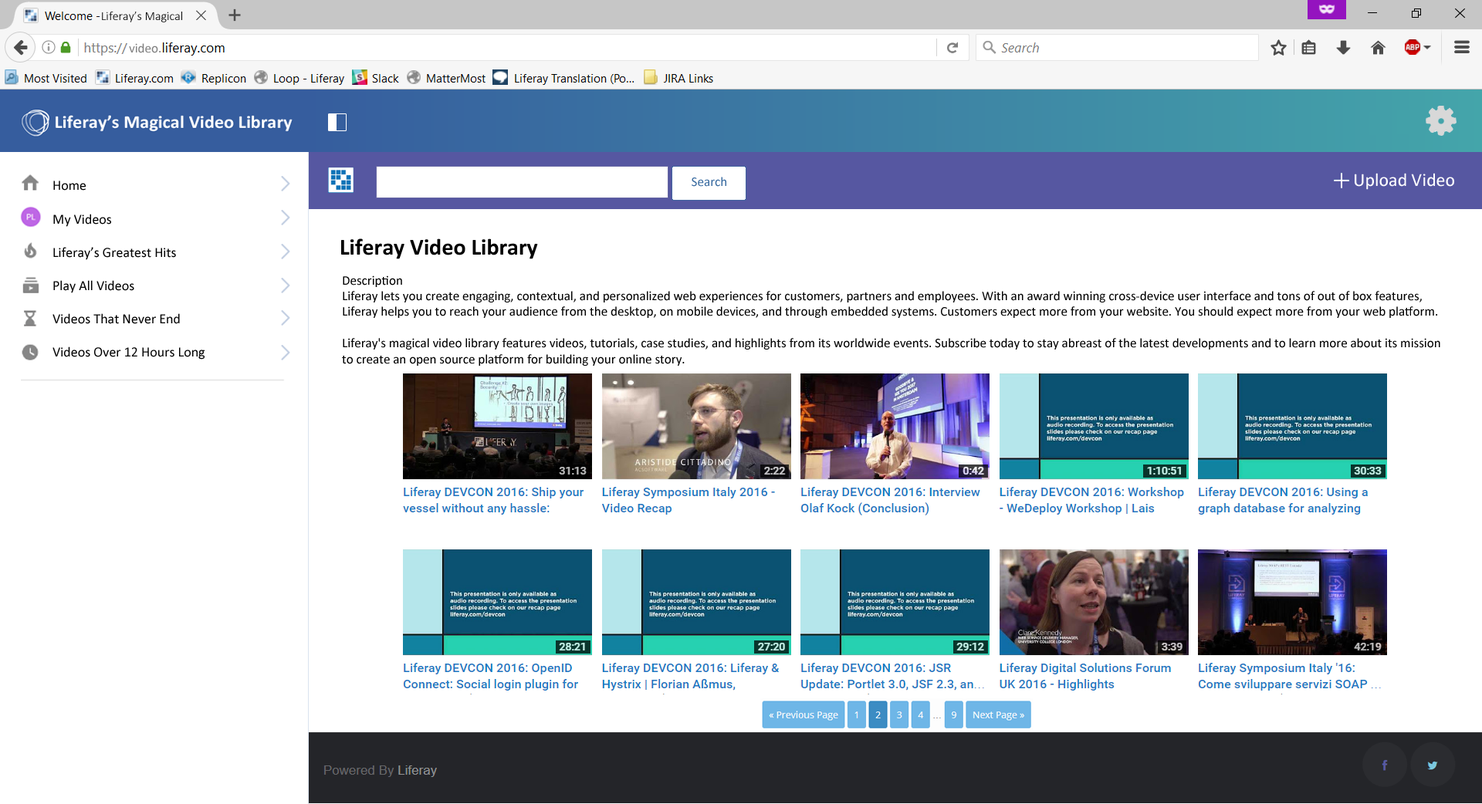
<style>
.page{position:relative;width:1482px;height:804px;background:#ffffff}
.page>*{position:absolute;margin:0}
.t1{font:12.4px "Calibri-Light";color:#000000}
.t2{font:13.1px "Calibri";color:#808080}
.t3{font:18.5px "Calibri";color:#ffffff}
.t4{font:13.9px "Calibri";color:#000000}
.t5{font:23.2px "Calibri-Bold";color:#000000}
.t6{font:13.1px "Calibri";color:#000000}
</style>
<div class="page">
<p class="t1" style="left:102px;top:12px;width:80px;height:10px">Liferay’s Magical</p>
<p class="t2" style="left:129px;top:43px;width:32px;height:10px">video.</p>
<p class="t3" style="left:1355px;top:173px;width:99px;height:17px">Upload Video</p>
<p class="t4" style="left:52px;top:181px;width:153px;height:179px">Home<br><br>My Videos<br><br>Liferay’s Greatest Hits<br><br>Play All Videos<br><br>Videos That Never End<br><br>Videos Over 12 Hours Long</p>
<p class="t5" style="left:341px;top:239px;width:197px;height:20px">Liferay Video Library</p>
<p class="t6" style="left:342px;top:276px;width:1099px;height:90px">Description<br>Liferay lets you create engaging, contextual, and personalized web experiences for customers, partners and employees. With an award winning cross-device user interface and tons of out of box features, Liferay helps you to reach your audience from the desktop, on mobile devices, and through embedded systems. Customers expect more from your website. You should expect more from your web platform.<br><br>Liferay's magical video library features videos, tutorials, case studies, and highlights from its worldwide events. Subscribe today to stay abreast of the latest developments and to learn more about its mission to create an open source platform for building your online story.</p>
</div>
